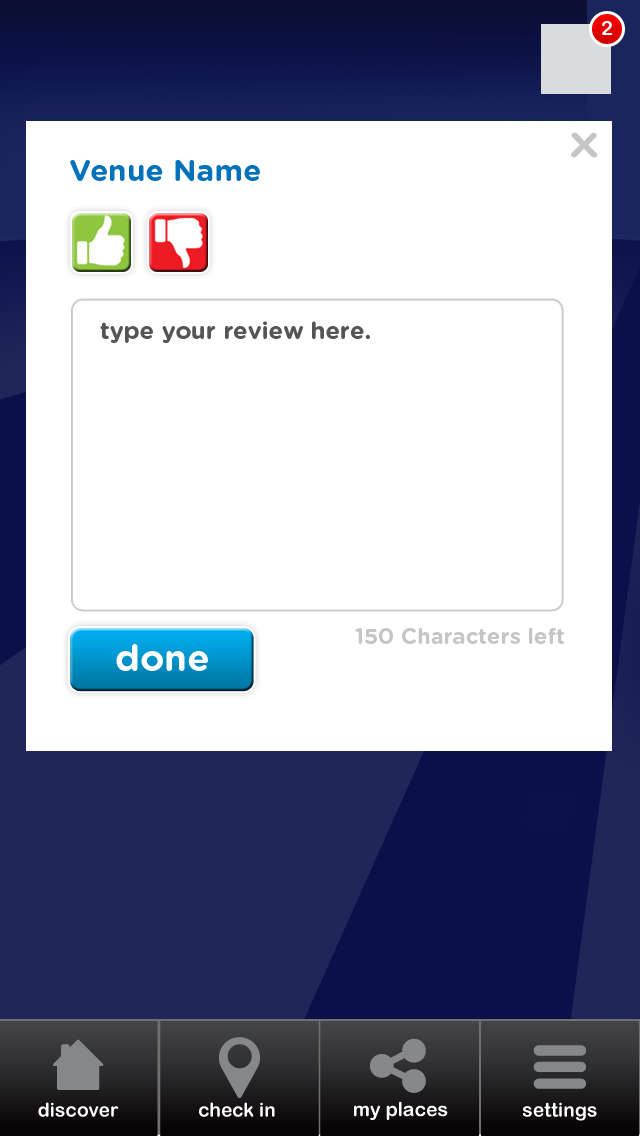
<style>
.page{position:relative;width:640px;height:1136px;background:#ffffff}
.page>*{position:absolute;margin:0}
.t1{font:20px "ArialRoundedMTBold";color:#ffffff}
.t2{font:34.6px "GothamRounded-Bold";color:#c5c5c5;scale:1.23 1}
.t3{font:30px "GothamRounded-Bold";color:#0072bc}
.t4{font:24px "GothamRounded-Bold";color:#555555}
.t5{font:22.1px "GothamRounded-Bold";color:#c5c5c5}
.t6{font:36.9px "GothamRounded-Bold";color:#ffffff}
</style>
<div class="page">
<p class="t1" style="left:602px;top:21px;width:11px;height:14px">2</p>
<p class="t2" style="left:571px;top:132px;width:27px;height:26px">X</p>
<p class="t3" style="left:70px;top:160px;width:190px;height:21px">Venue Name</p>
<p class="t4" style="left:100px;top:321px;width:270px;height:22px">type your review here.</p>
<p class="t5" style="left:355px;top:627px;width:210px;height:17px">150 Characters left</p>
<p class="t6" style="left:116px;top:644px;width:92px;height:27px">done</p>
</div>
